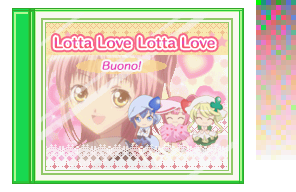
<style>
.page{position:relative;width:296px;height:192px}
.page>*{position:absolute;margin:0}
.t1{font:13px "HummingStd-B";letter-spacing:0.02em}
.t2{font:10px "HummingStd-D";letter-spacing:0.02em;color:#e848b8;font-style:italic}
</style>
<div class="page">
<p class="t1" style="left:54px;top:36px;width:161px;height:13px">Lotta Love Lotta Love</p>
<p class="t2" style="left:102px;top:61px;width:40px;height:9px">Buono!</p>
</div>
